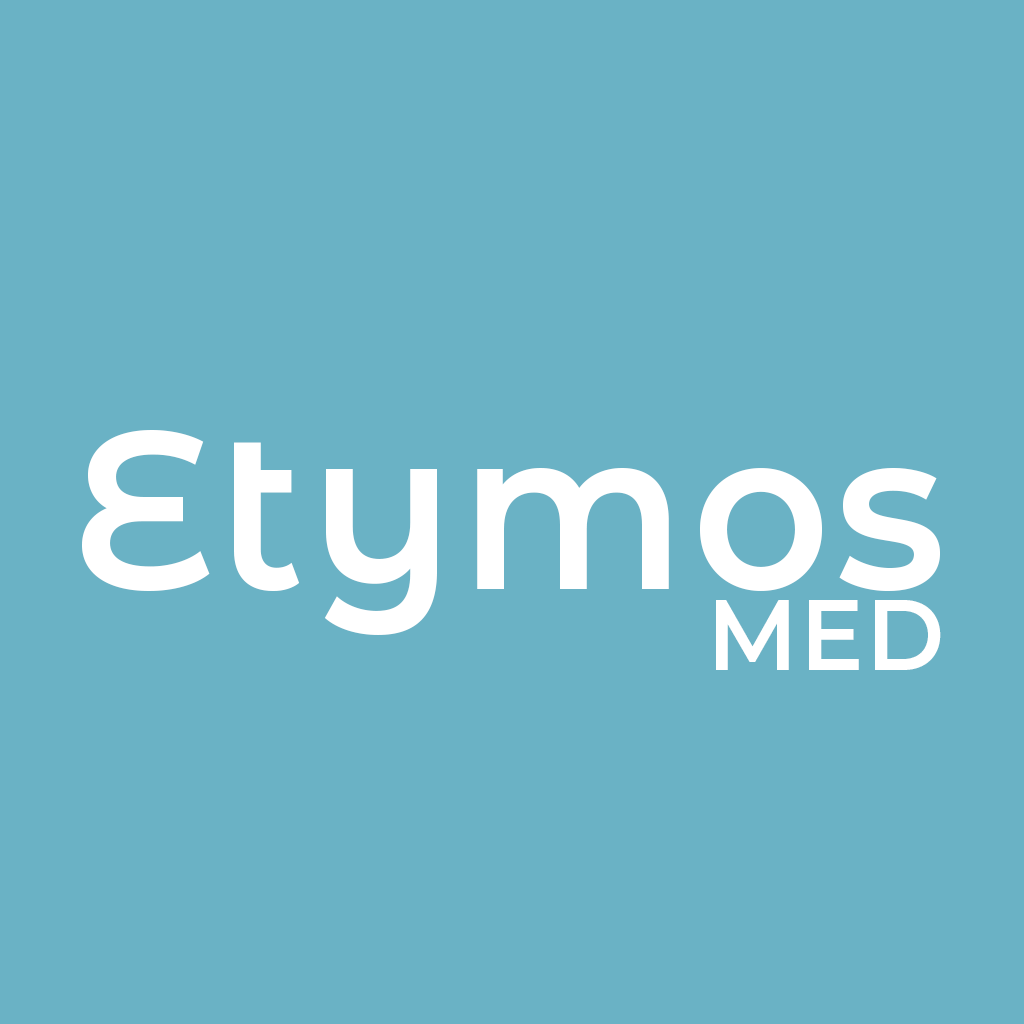
<style>
.page{position:relative;width:1024px;height:1024px;background:#6ab2c5}
.page>*{position:absolute;margin:0}
.t1{font:225px "MontserratAlternates-SemiBold";letter-spacing:0.025em;color:#ffffff;scale:0.95 1}
.t2{font:100px "Montserrat-SemiBold";letter-spacing:0.025em;color:#ffffff;scale:0.95 1}
</style>
<div class="page">
<p class="t1" style="left:82px;top:430px;width:858px;height:205px">Etymos</p>
<p class="t2" style="left:716px;top:600px;width:225px;height:70px">MED</p>
</div>
